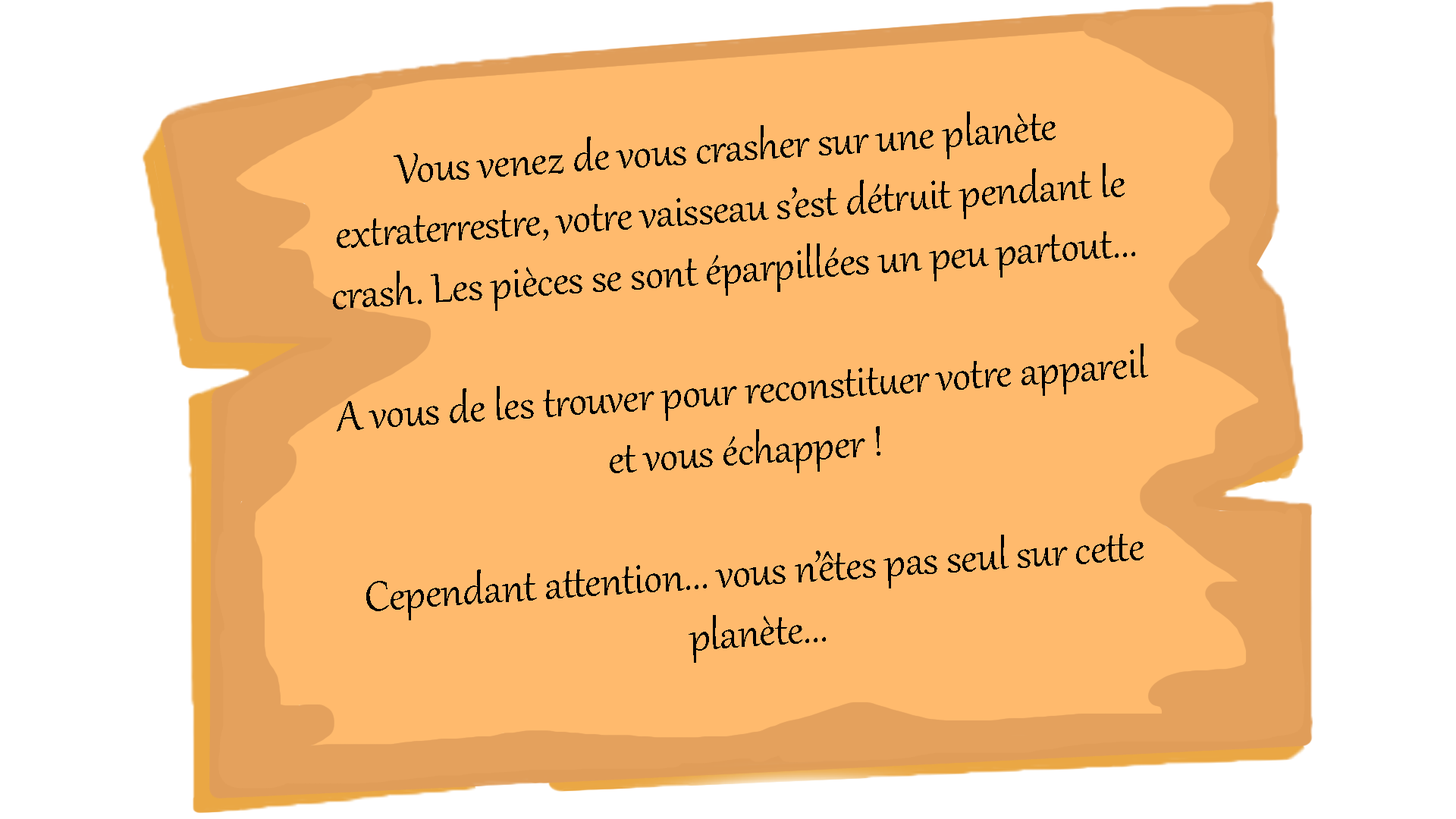
<style>
.page{position:relative;width:1456px;height:819px;background:#ffba6d}
.page>*{position:absolute;margin:0}
.t1{font:50.6px "Gabriola";color:#000000}
</style>
<div class="page">
<p class="t1" style="left:333px;top:111px;width:815px;height:552px;text-align:center;rotate:-4deg">Vous venez de vous crasher sur une planète extraterrestre, votre vaisseau s’est détruit pendant le crash. Les pièces se sont éparpillées un peu partout...<br><br>A vous de les trouver pour reconstituer votre appareil et vous échapper !<br><br>Cependant attention... vous n’êtes pas seul sur cette planète...</p>
</div>
